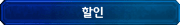
<style>
.page{position:relative;width:180px;height:25px}
.page>*{position:absolute;margin:0}
.t1{font:13px "2002L";color:#ffffff}
</style>
<div class="page">
<p class="t1" style="left:82px;top:6px;width:21px;height:12px">할인</p>
</div>
